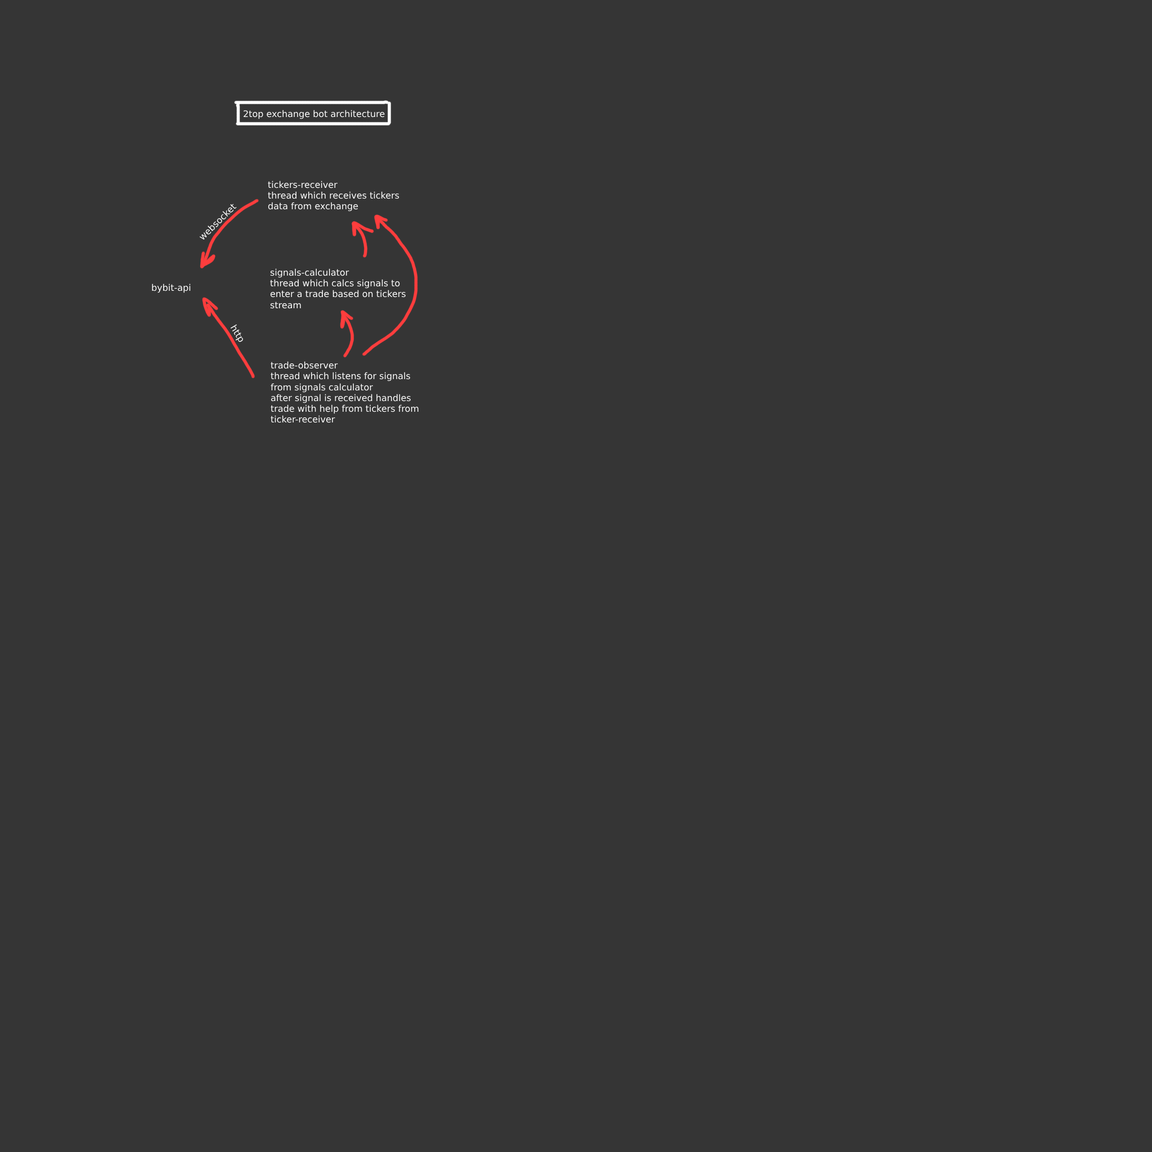
<style>
.page{position:relative;width:1152px;height:1152px;background:#353535}
.page>*{position:absolute;margin:0}
.t1{font:9px "DejaVuSans";color:#ffffff}
</style>
<div class="page">
<p class="t1" style="left:244px;top:110px;width:141px;height:9px">2top exchange bot architecture</p>
<p class="t1" style="left:268px;top:181px;width:131px;height:31px">tickers-receiver<br>thread which receives tickers<br>data from exchange</p>
<p class="t1" style="left:199px;top:204px;width:38px;height:36px;rotate:-45deg">websocket</p>
<p class="t1" style="left:270px;top:268px;width:136px;height:41px">signals-calculator<br>thread which calcs signals to<br>enter a trade based on tickers<br>stream</p>
<p class="t1" style="left:152px;top:284px;width:39px;height:9px">bybit-api</p>
<p class="t1" style="left:230px;top:324px;width:13px;height:18px;rotate:59deg">http</p>
<p class="t1" style="left:271px;top:361px;width:147px;height:62px">trade-observer<br>thread which listens for signals from signals calculator<br>after signal is received handles trade with help from tickers from ticker-receiver</p>
</div>
